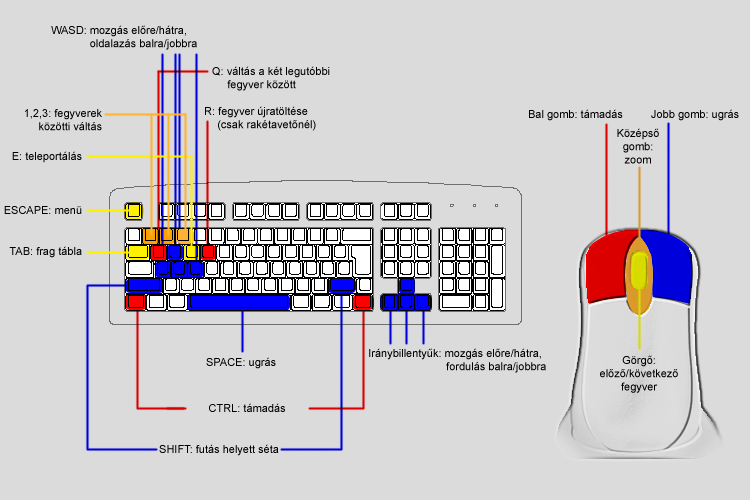
<style>
.page{position:relative;width:750px;height:500px;background:#dbdbdb}
.page>*{position:absolute;margin:0}
.t1{font:11px "ArialMT";color:#000000}
</style>
<div class="page">
<p class="t1" style="left:51px;top:25px;width:146px;height:25px;text-align:center">WASD: mozgás előre/hátra,<br>                oldalazás balra/jobbra</p>
<p class="t1" style="left:212px;top:66px;width:118px;height:25px">Q: váltás a két legutóbbi<br>     fegyver között</p>
<p class="t1" style="left:25px;top:109px;width:77px;height:22px;text-align:right">1,2,3: fegyverek<br>közötti váltás</p>
<p class="t1" style="left:205px;top:106px;width:111px;height:25px;text-align:center">R: fegyver újratöltése<br>       (csak rakétavetőnél)</p>
<p class="t1" style="left:529px;top:109px;width:94px;height:12px">Bal gomb: támadás</p>
<p class="t1" style="left:651px;top:109px;width:88px;height:12px">Jobb gomb: ugrás</p>
<p class="t1" style="left:617px;top:128px;width:42px;height:36px;text-align:center">Középső<br>gomb:<br>zoom</p>
<p class="t1" style="left:12px;top:151px;width:70px;height:12px">E: teleportálás</p>
<p class="t1" style="left:4px;top:206px;width:78px;height:8px">ESCAPE: menü</p>
<p class="t1" style="left:9px;top:246px;width:73px;height:12px">TAB: frag tábla</p>
<p class="t1" style="left:369px;top:348px;width:177px;height:25px;text-align:center">Iránybillentyűk: mozgás előre/hátra,<br>                           fordulás balra/jobbra</p>
<p class="t1" style="left:206px;top:357px;width:70px;height:12px">SPACE: ugrás</p>
<p class="t1" style="left:600px;top:355px;width:78px;height:38px;text-align:center">Görgő:<br>előző/következő<br>fegyver</p>
<p class="t1" style="left:209px;top:403px;width:76px;height:9px">CTRL: támadás</p>
<p class="t1" style="left:159px;top:444px;width:120px;height:12px">SHIFT: futás helyett séta</p>
</div>
